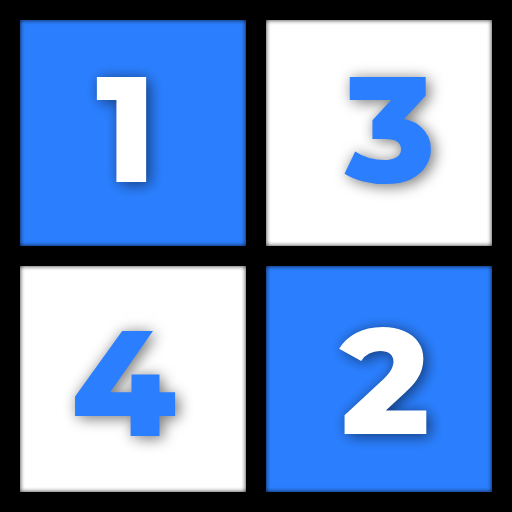
<style>
.page{position:relative;width:512px;height:512px;background:#2b7fff}
.page>*{position:absolute;margin:0}
.t1{font:150px "Montserrat-ExtraBold";color:#ffffff}
.t2{font:150px "Montserrat-ExtraBold";color:#2b7fff}
</style>
<div class="page">
<p class="t1" style="left:96px;top:77px;width:51px;height:105px">1</p>
<p class="t2" style="left:344px;top:77px;width:87px;height:108px">3</p>
<p class="t1" style="left:339px;top:326px;width:88px;height:108px">2</p>
<p class="t2" style="left:75px;top:331px;width:101px;height:105px">4</p>
</div>
